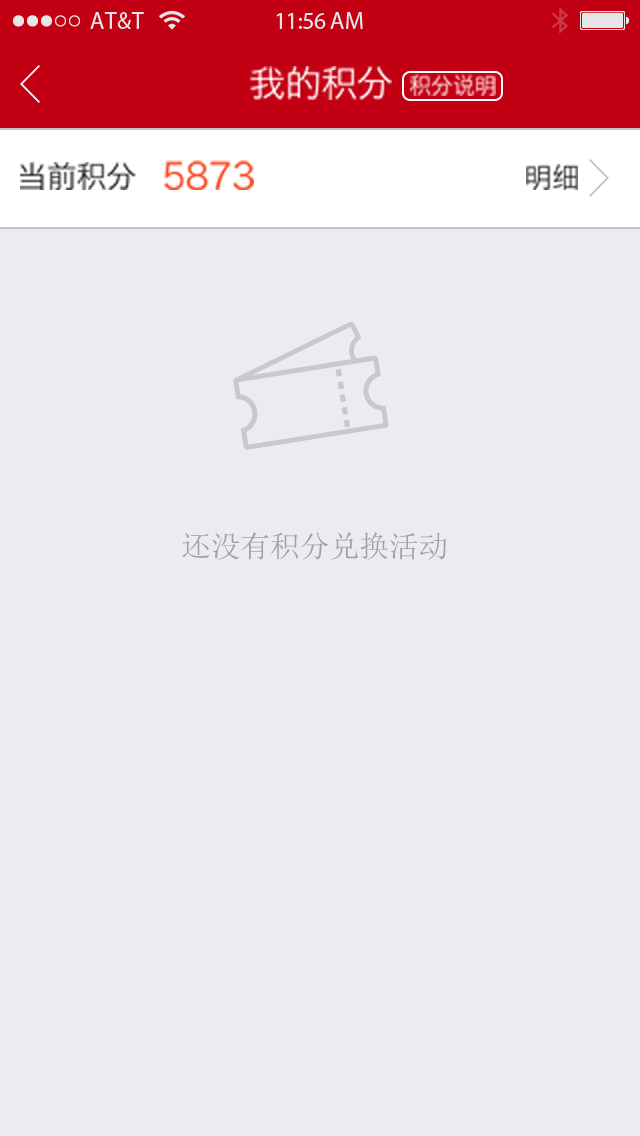
<style>
.page{position:relative;width:640px;height:1136px;background:#ebebf0}
.page>*{position:absolute;margin:0}
.t1{font:36px "HiraginoSansGB-W3";letter-spacing:-0.01em;color:#ffffff}
.t2{font:22px "HiraginoSansGB-W3";letter-spacing:-0.01em}
.t3{font:36px "HiraginoSansGB-W3";letter-spacing:-0.01em;color:#fb451f}
.t4{font:30px "HiraginoSansGB-W3";letter-spacing:-0.01em;color:#1e1e1e}
.t5{font:28px "HiraginoSansGB-W3";letter-spacing:-0.01em}
.t6{font:30px "SimSun";letter-spacing:-0.01em;color:#a0a0a0}
</style>
<div class="page">
<p class="t1" style="left:250px;top:66px;width:142px;height:34px">我的积分</p>
<p class="t2" style="left:410px;top:74px;width:86px;height:22px">积分说明</p>
<p class="t3" style="left:164px;top:160px;width:90px;height:30px">5873</p>
<p class="t4" style="left:20px;top:162px;width:116px;height:28px">当前积分</p>
<p class="t5" style="left:526px;top:164px;width:52px;height:26px">明细</p>
<p class="t6" style="left:182px;top:532px;width:265px;height:28px">还没有积分兑换活动</p>
</div>
